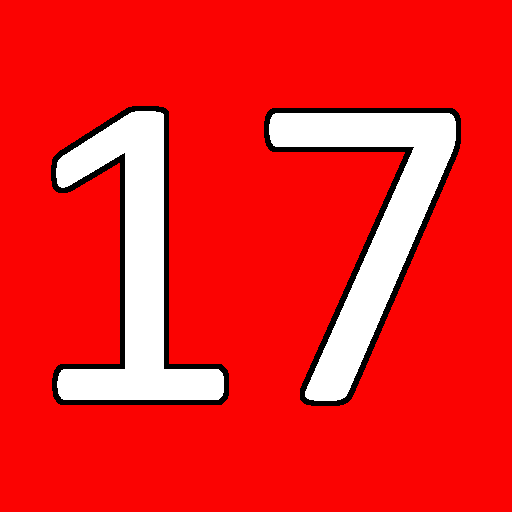
<style>
.page{position:relative;width:512px;height:512px;background:#fb0302}
.page>*{position:absolute;margin:0}
.t1{font:451.6px "Calibri";color:#ffffff}
</style>
<div class="page">
<p class="t1" style="left:56px;top:111px;width:400px;height:290px">17</p>
</div>
